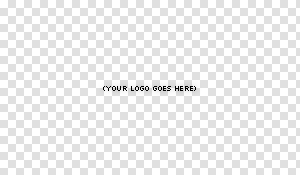
<style>
.page{position:relative;width:300px;height:175px;background:#ffffff}
.page>*{position:absolute;margin:0}
.t1{font:8px "Silkscreen";letter-spacing:-0.1em;color:#000000}
</style>
<div class="page">
<p class="t1" style="left:103px;top:86px;width:93px;height:5px">(your logo goes here)</p>
</div>
